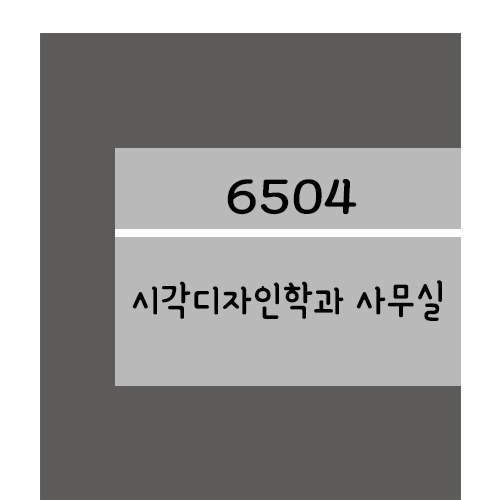
<style>
.page{position:relative;width:500px;height:500px;background:#5d5a5a}
.page>*{position:absolute;margin:0}
.t1{font:61.2px "YanoljaYacheR";color:#000000;scale:1.18 1}
.t2{font:48px "YanoljaYacheR";color:#000000}
</style>
<div class="page">
<p class="t1" style="left:227px;top:179px;width:130px;height:36px">6504</p>
<p class="t2" style="left:132px;top:280px;width:310px;height:41px">시각디자인학과 사무실</p>
</div>
